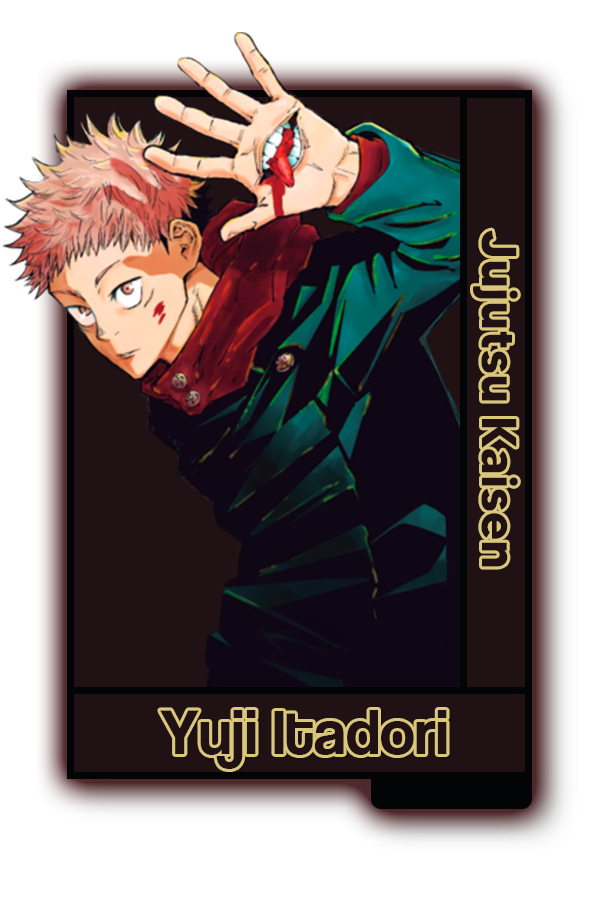
<style>
.page{position:relative;width:600px;height:900px;background:#ffffff}
.page>*{position:absolute;margin:0}
.t1{font:48.8px "MADETOMMY-Bold";color:#1e1214}
.t2{font:65.2px "CoolveticaRg-Regular";color:#1e1214}
</style>
<div class="page">
<p class="t1" style="left:473px;top:230px;width:45px;height:337px;rotate:90deg">Jujutsu Kaisen</p>
<p class="t2" style="left:160px;top:710px;width:287px;height:59px">Yuji Itadori</p>
</div>
